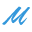
<style>
.page{position:relative;width:32px;height:32px;background:#ffffff}
.page>*{position:absolute;margin:0}
.t1{font:25px "AirwaysPERSONALUSEONLY";letter-spacing:0.01em;color:#3498db}
</style>
<div class="page">
<p class="t1" style="left:2px;top:6px;width:28px;height:19px">M</p>
</div>
